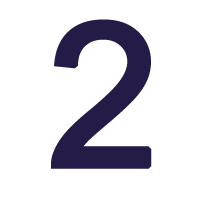
<style>
.page{position:relative;width:200px;height:200px;background:#ffffff}
.page>*{position:absolute;margin:0}
.t1{font:200px "ArialMT";color:#241b47;font-weight:bold}
</style>
<div class="page">
<p class="t1" style="left:51px;top:19px;width:101px;height:150px">2</p>
</div>
